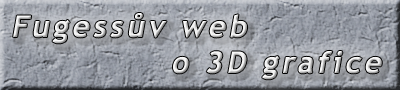
<style>
.page{position:relative;width:400px;height:90px}
.page>*{position:absolute;margin:0}
.t1{font:30px "TrebuchetMS-Bold";letter-spacing:0.1em;font-weight:bold;font-style:italic}
</style>
<div class="page">
<p class="t1" style="left:13px;top:13px;width:369px;height:67px">Fugessův web<br>             o 3D grafice</p>
</div>
